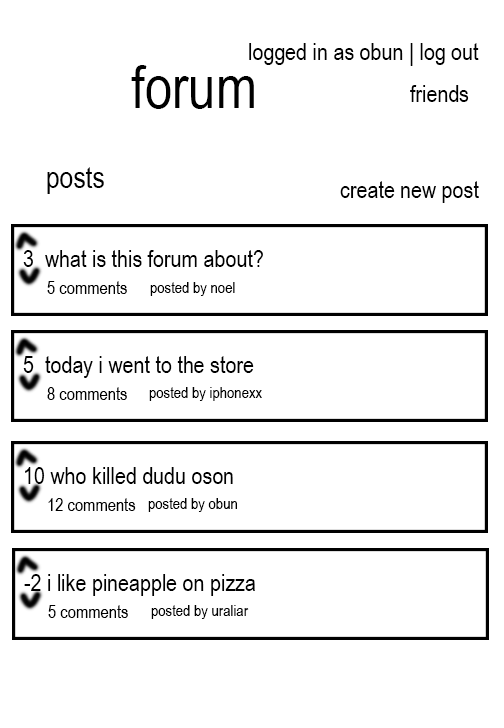
<style>
.page{position:relative;width:504px;height:728px;background:#ffffff}
.page>*{position:absolute;margin:0}
.t1{font:24px "ArialNarrow";color:#000000}
.t2{font:60px "ArialNarrow";color:#000000}
.t3{font:30px "ArialNarrow";color:#000000}
.t4{font:18px "ArialNarrow";color:#000000}
.t5{font:16px "ArialNarrow";color:#000000}
</style>
<div class="page">
<p class="t1" style="left:249px;top:43px;width:230px;height:23px">logged in as obun | log out</p>
<p class="t2" style="left:131px;top:65px;width:123px;height:44px">forum</p>
<p class="t1" style="left:410px;top:85px;width:59px;height:17px">friends</p>
<p class="t3" style="left:47px;top:167px;width:57px;height:27px">posts</p>
<p class="t1" style="left:340px;top:181px;width:139px;height:22px">create new post</p>
<p class="t1" style="left:23px;top:250px;width:240px;height:17px">3  what is this forum about?</p>
<p class="t4" style="left:47px;top:281px;width:80px;height:13px">5 comments</p>
<p class="t5" style="left:150px;top:282px;width:85px;height:14px">posted by noel</p>
<p class="t1" style="left:23px;top:356px;width:231px;height:22px">5  today i went to the store</p>
<p class="t4" style="left:47px;top:387px;width:80px;height:13px">8 comments</p>
<p class="t5" style="left:149px;top:387px;width:113px;height:14px">posted by iphonexx</p>
<p class="t1" style="left:25px;top:467px;width:208px;height:17px">10 who killed dudu oson</p>
<p class="t4" style="left:48px;top:498px;width:88px;height:13px">12 comments</p>
<p class="t5" style="left:148px;top:498px;width:89px;height:14px">posted by obun</p>
<p class="t1" style="left:24px;top:574px;width:231px;height:22px">-2 i like pineapple on pizza</p>
<p class="t4" style="left:48px;top:605px;width:80px;height:13px">5 comments</p>
<p class="t5" style="left:151px;top:605px;width:98px;height:14px">posted by uraliar</p>
</div>
